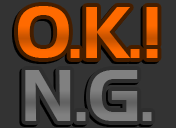
<style>
.page{position:relative;width:176px;height:128px;background:#333333}
.page>*{position:absolute;margin:0}
.t1{font:71.1px "HandelGothicBT-Regular";letter-spacing:-0.01em;color:#ff6a00}
.t2{font:71.1px "HandelGothicBT-Regular";letter-spacing:-0.01em;color:#7f7f7f}
</style>
<div class="page">
<p class="t1" style="left:18px;top:6px;width:140px;height:52px">O.K.!</p>
<p class="t2" style="left:25px;top:70px;width:127px;height:51px">N.G.</p>
</div>
